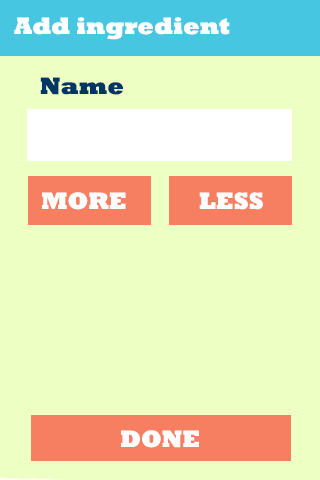
<style>
.page{position:relative;width:320px;height:480px;background:#edffc3}
.page>*{position:absolute;margin:0}
.t1{font:24px "Rockwell-ExtraBold";color:#ffffff}
.t2{font:24px "Rockwell-ExtraBold";color:#003663}
</style>
<div class="page">
<p class="t1" style="left:14px;top:17px;width:216px;height:23px">Add ingredient</p>
<p class="t2" style="left:40px;top:77px;width:83px;height:18px">Name</p>
<p class="t1" style="left:42px;top:192px;width:84px;height:18px">MORE</p>
<p class="t1" style="left:199px;top:192px;width:64px;height:18px">LESS</p>
<p class="t1" style="left:121px;top:430px;width:78px;height:18px">DONE</p>
</div>
